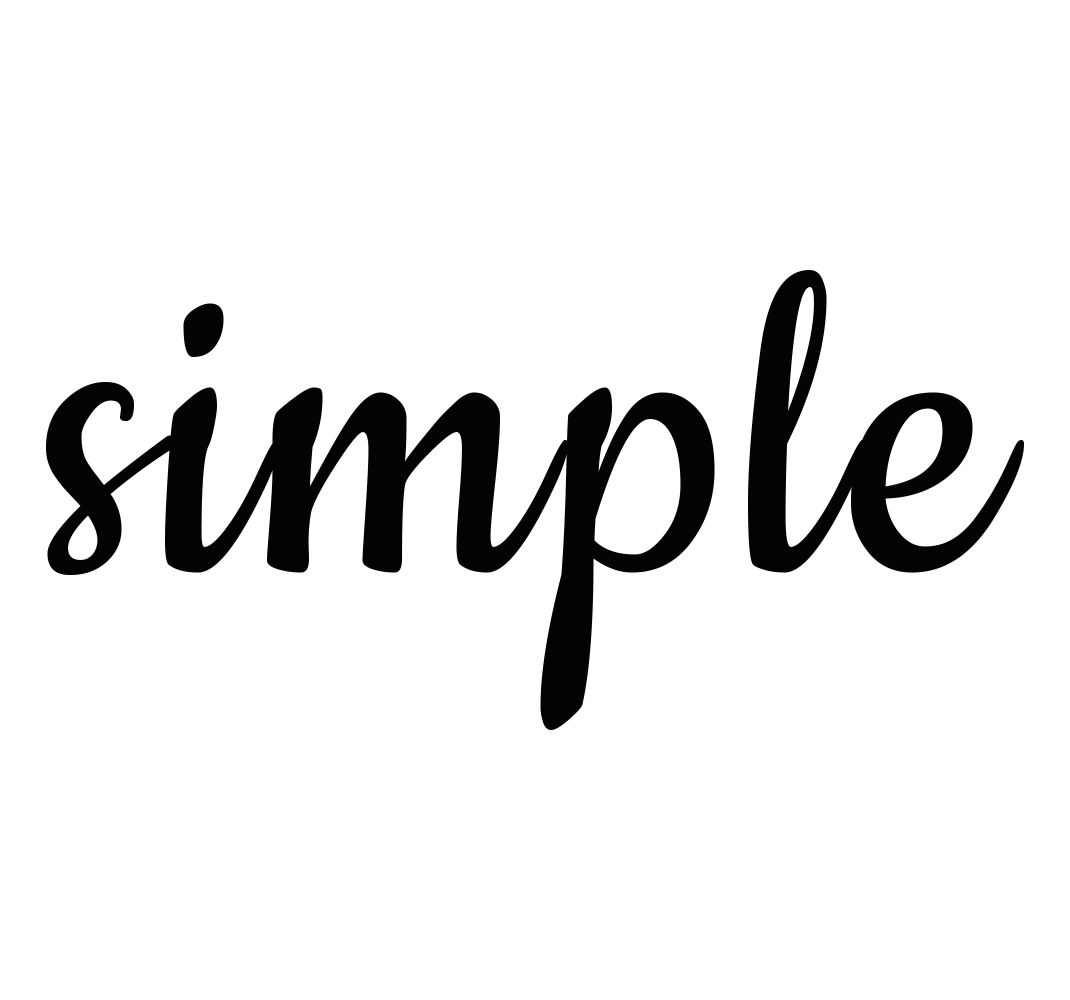
<style>
.page{position:relative;width:1070px;height:1000px;background:#ffffff}
.page>*{position:absolute;margin:0}
.t1{font:500px "Cookie-Regular";letter-spacing:0.03em;color:#030303}
</style>
<div class="page">
<p class="t1" style="left:46px;top:270px;width:978px;height:460px">simple</p>
</div>
